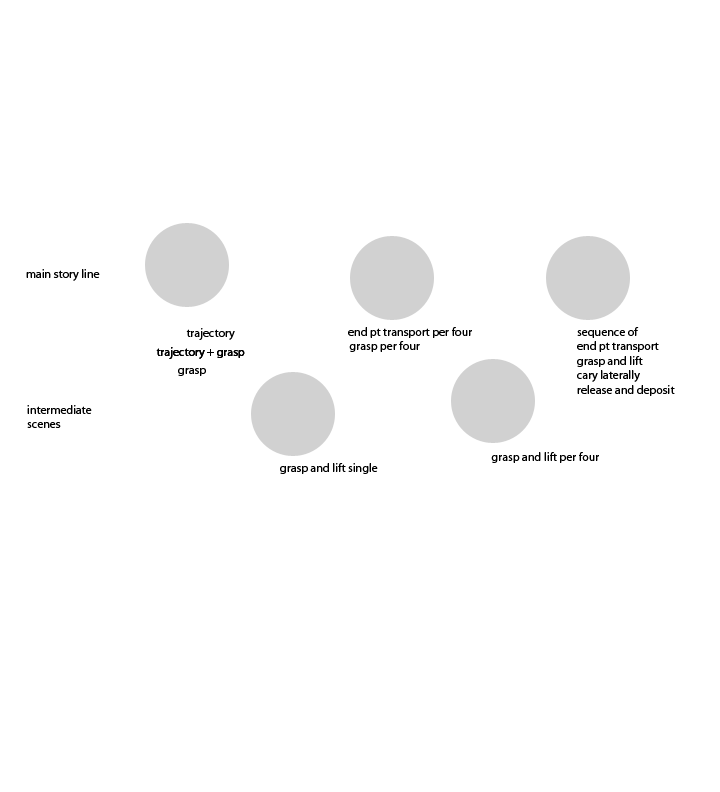
<style>
.page{position:relative;width:720px;height:792px;background:#ffffff}
.page>*{position:absolute;margin:0}
.t1{font:12px "MyriadPro-Regular";color:#000000}
</style>
<div class="page">
<p class="t1" style="left:26px;top:269px;width:74px;height:12px">main story line</p>
<p class="t1" style="left:186px;top:328px;width:49px;height:12px">trajectory</p>
<p class="t1" style="left:348px;top:327px;width:124px;height:11px">end pt transport per four</p>
<p class="t1" style="left:577px;top:327px;width:98px;height:69px">sequence of<br>end pt transport<br>grasp and lift<br>cary laterally<br>release and deposit</p>
<p class="t1" style="left:349px;top:341px;width:71px;height:11px">grasp per four</p>
<p class="t1" style="left:156px;top:347px;width:89px;height:12px">trajectory + grasp</p>
<p class="t1" style="left:156px;top:347px;width:89px;height:12px">trajectory + grasp</p>
<p class="t1" style="left:178px;top:368px;width:28px;height:8px">grasp</p>
<p class="t1" style="left:27px;top:405px;width:65px;height:23px">intermediate<br>scenes</p>
<p class="t1" style="left:491px;top:452px;width:108px;height:11px">grasp and lift per four</p>
<p class="t1" style="left:280px;top:463px;width:98px;height:11px">grasp and lift single</p>
</div>
